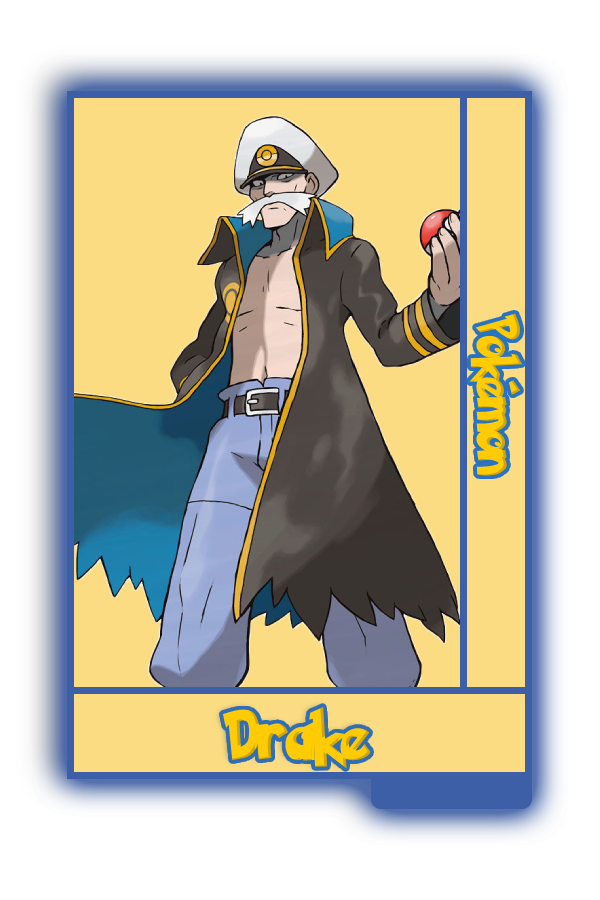
<style>
.page{position:relative;width:600px;height:900px;background:#fbdc83}
.page>*{position:absolute;margin:0}
.t1{font:48.8px "PokemonSolidNormal";color:#ffcb05;scale:0.8 1}
.t2{font:56.6px "PokemonSolidNormal";color:#ffcb05;scale:0.92 1}
</style>
<div class="page">
<p class="t1" style="left:469px;top:313px;width:54px;height:163px;rotate:90deg">Pokémon</p>
<p class="t2" style="left:222px;top:706px;width:149px;height:63px">Drake</p>
</div>
